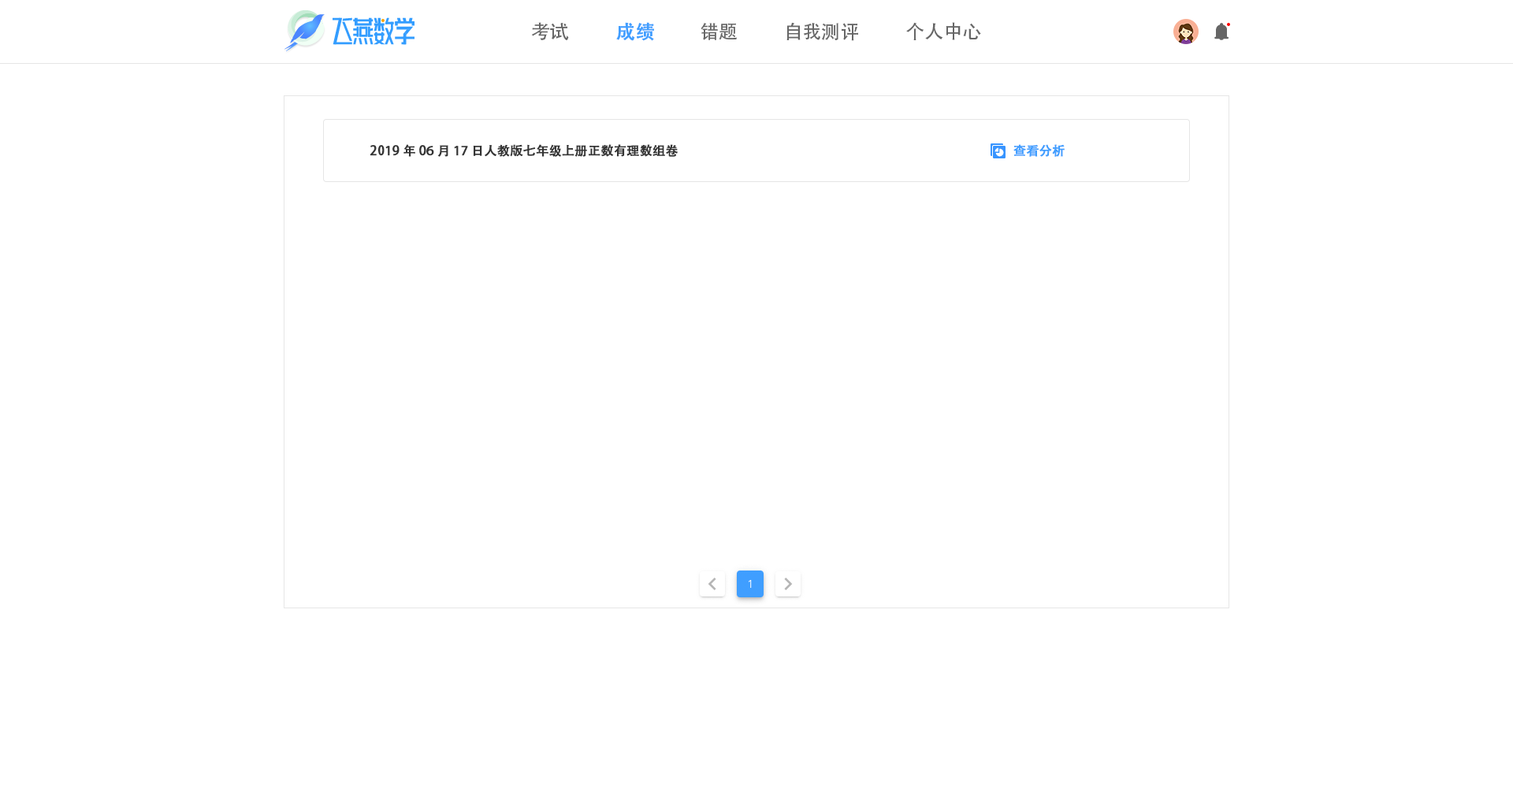
<style>
.page{position:relative;width:1513px;height:788px;background:#ffffff}
.page>*{position:absolute;margin:0}
.t1{font:18.9px "AdobeHeitiStd-Regular";color:#666666}
.t2{font:18.9px "AdobeHeitiStd-Regular";color:#409eff;font-weight:bold}
.t3{font:12.6px "AdobeHeitiStd-Regular";color:#333333;font-weight:bold}
.t4{font:12.6px "AdobeHeitiStd-Regular";color:#409eff;font-weight:bold}
</style>
<div class="page">
<p class="t1" style="left:531px;top:22px;width:38px;height:18px">考试</p>
<p class="t2" style="left:616px;top:22px;width:38px;height:19px">成绩</p>
<p class="t1" style="left:701px;top:23px;width:36px;height:17px">错题</p>
<p class="t1" style="left:786px;top:22px;width:72px;height:19px">自我测评</p>
<p class="t1" style="left:906px;top:22px;width:75px;height:18px">个人中心</p>
<p class="t3" style="left:370px;top:144px;width:309px;height:13px">2019年06月17日人教版七年级上册正数有理数组卷</p>
<p class="t4" style="left:1013px;top:144px;width:52px;height:13px">查看分析</p>
</div>
